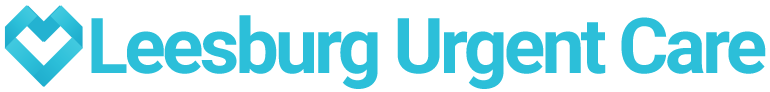
<style>
.page{position:relative;width:770px;height:92px;background:#ffffff}
.page>*{position:absolute;margin:0}
.t1{font:77px "Roboto-Bold";letter-spacing:-0.05em;color:#2cbfd9}
</style>
<div class="page">
<p class="t1" style="left:91px;top:15px;width:675px;height:74px">Leesburg Urgent Care</p>
</div>
